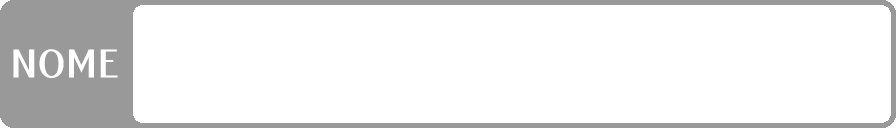
<style>
.page{position:relative;width:896px;height:128px;background:#ffffff}
.page>*{position:absolute;margin:0}
.t1{font:40px "PfennigBold";color:#ffffff}
</style>
<div class="page">
<p class="t1" style="left:13px;top:49px;width:105px;height:29px">NOME</p>
</div>
